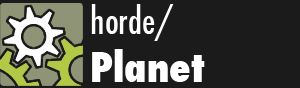
<style>
.page{position:relative;width:300px;height:88px;background:#1b1b1b}
.page>*{position:absolute;margin:0}
.t1{font:36px "Futura-CondensedMedium";color:#ffffff}
.t2{font:40px "Futura-CondensedExtraBold";color:#ffffff}
</style>
<div class="page">
<p class="t1" style="left:91px;top:4px;width:114px;height:78px">horde/<br><span class="t2">Planet</span></p>
</div>
